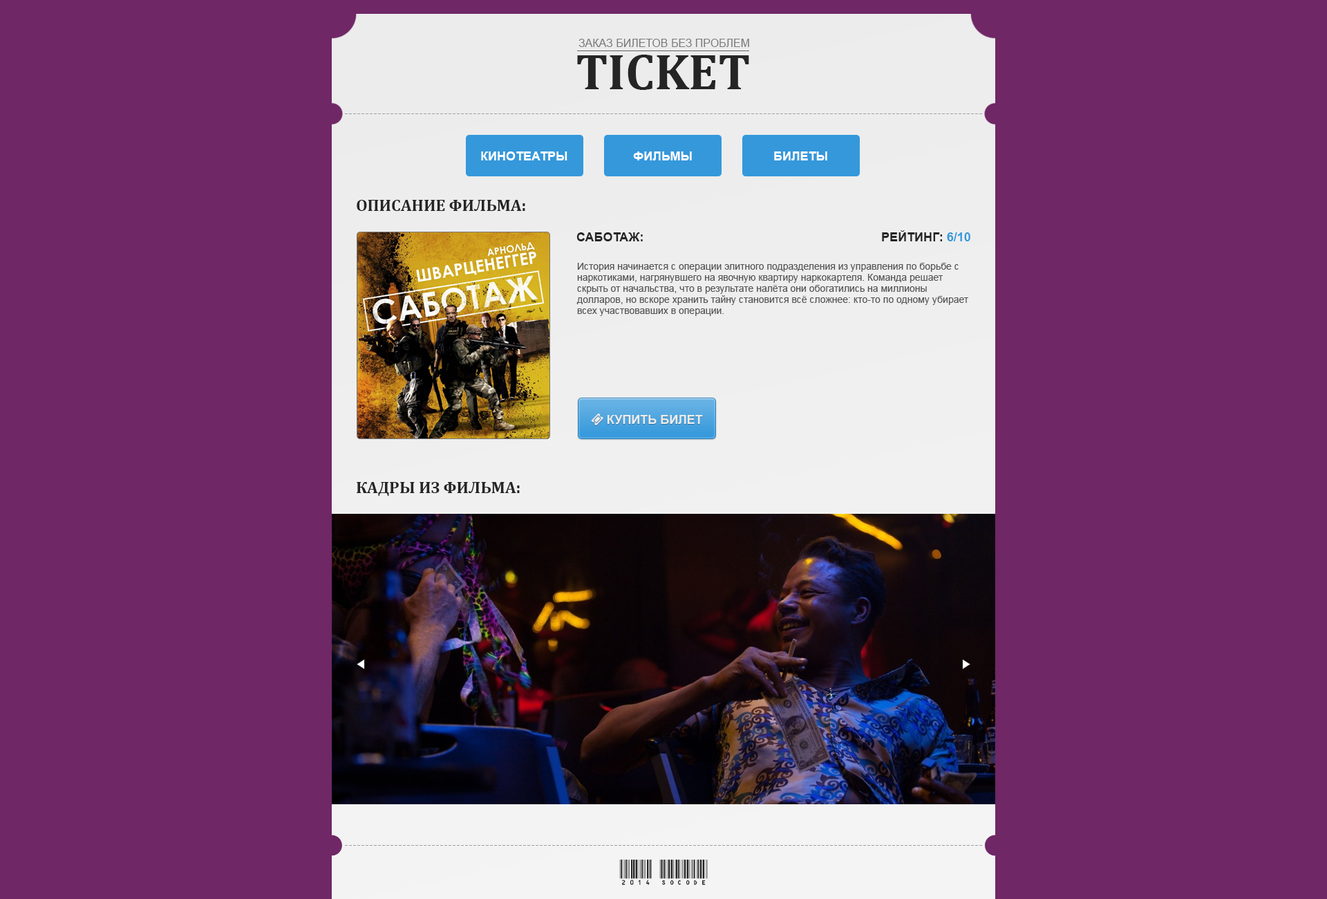
<style>
.page{position:relative;width:1327px;height:899px;background:#6f2766}
.page>*{position:absolute;margin:0}
.t1{font:11.1px "ArialMT";color:#797979;text-transform:uppercase}
.t2{font:50.5px "Cambria-Bold";color:#252525;text-transform:uppercase}
.t3{font:16.6px "Cambria-Bold";color:#252525;text-transform:uppercase}
.t4{font:12.4px "Arial-BoldMT";color:#252525;text-transform:uppercase}
.t5{font:12.4px "Arial-BoldMT";color:#3498db;text-transform:uppercase}
.t6{font:9.7px/11.1px "ArialMT";color:#555555}
.t7{font:24.9px "C39HrP24DhTt";color:#252525}
</style>
<div class="page">
<p class="t1" style="left:579px;top:39px;width:170px;height:8px">Заказ билетов без проблем</p>
<p class="t2" style="left:577px;top:55px;width:172px;height:35px">TICKET</p>
<p class="t3" style="left:357px;top:200px;width:168px;height:11px">описание фильма:</p>
<p class="t4" style="left:576px;top:232px;width:67px;height:9px">Саботаж:</p>
<p class="t4" style="left:882px;top:230px;width:88px;height:11px">РЕЙТИНГ: <span class="t5">6/10</span></p>
<p class="t6" style="left:576px;top:263px;width:392px;height:53px">История начинается с операции элитного подразделения из управления по борьбе с наркотиками, нагрянувшего на явочную квартиру наркокартеля. Команда решает скрыть от начальства, что в результате налёта они обогатились на миллионы долларов, но вскоре хранить тайну становится всё сложнее: кто-то по одному убирает всех участвовавших в операции.</p>
<p class="t3" style="left:357px;top:482px;width:163px;height:14px">КАДРЫ ИЗ фильма:</p>
<p class="t7" style="left:619px;top:859px;width:89px;height:26px">2014 socode</p>
</div>
